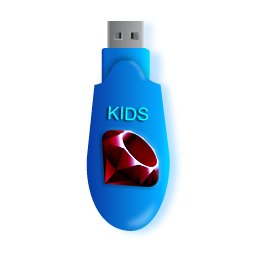
<style>
.page{position:relative;width:256px;height:256px;background:#ffffff}
.page>*{position:absolute;margin:0}
.t1{font:17.5px "ArialMT";color:#07ffff}
</style>
<div class="page">
<p class="t1" style="left:108px;top:106px;width:41px;height:15px;rotate:3deg">KIDS</p>
</div>
